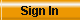
<style>
.page{position:relative;width:80px;height:20px;background:#ed9802}
.page>*{position:absolute;margin:0}
.t1{font:12px "Arial-BoldMT";color:#101010}
</style>
<div class="page">
<p class="t1" style="left:21px;top:6px;width:37px;height:11px">Sign In</p>
</div>
